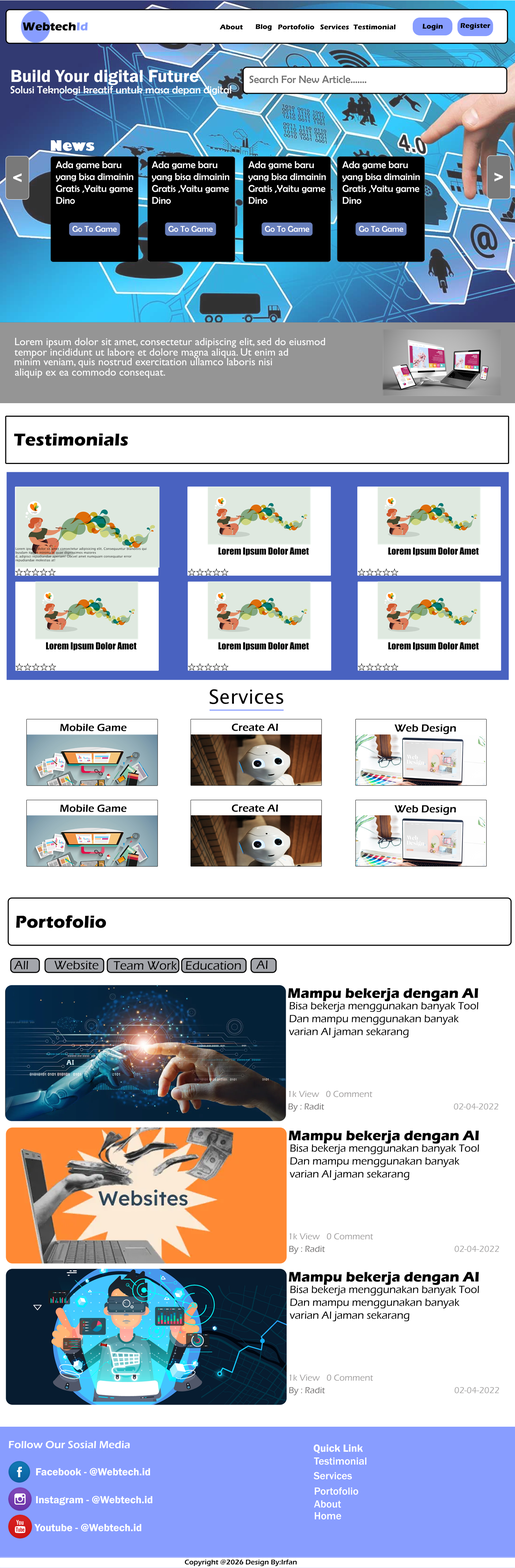
<style>
.page{position:relative;width:515px;height:1568px;background:#ffffff}
.page>*{position:absolute;margin:0}
.t1{font:17.9px "FranklinGothic-Demi";color:#ffffff}
.t2{font:10.7px "BerlinSansFB-Reg";color:#707070}
.t3{font:10.7px "BerlinSansFB-Reg";color:#ffffff}
.t4{font:14.2px "GillSans-UltraBold";color:#ffffff}
.t5{font:9.9px "BerlinSansFB-Reg";color:#ffffff}
.t6{font:17.9px "Impact";color:#ffffff}
.t7{font:8.5px "BerlinSansFB-Reg";color:#ffffff}
.t8{font:10.7px "GillSansMT";color:#ffffff}
.t9{font:17.9px "ErasITC-Bold";color:#000000}
.t10{font:3.2px "LucidaSans";color:#1b1514}
.t11{font:9.1px "Impact";color:#000000}
.t12{font:19.5px "LucidaSans";color:#000000}
.t13{font:10.7px "ErasITC-Demi";color:#000000}
.t14{font:10.7px "ErasITC-Demi";color:#ffffff}
.t15{font:10.7px "FranklinGothic-Demi";color:#ffffff}
.t16{font:10.7px "FranklinGothic-Medium";color:#ffffff}
.t17{font:7.2px "ErasITC-Demi";color:#000000}
</style>
<div class="page">
<p class="t1" style="left:11px;top:69px;width:188px;height:17px">Build Your digital Future</p>
<p class="t2" style="left:249px;top:75px;width:118px;height:8px">Search For New Article.......</p>
<p class="t3" style="left:10px;top:86px;width:222px;height:10px">Solusi Teknologi kreatif untuk masa depan digital</p>
<p class="t4" style="left:50px;top:140px;width:45px;height:11px">News</p>
<p class="t5" style="left:55px;top:161px;width:79px;height:43px">Ada game baru<br>yang bisa dimainin<br>Gratis ,Yaitu game<br>Dino</p>
<p class="t5" style="left:151px;top:161px;width:79px;height:43px">Ada game baru<br>yang bisa dimainin<br>Gratis ,Yaitu game<br>Dino</p>
<p class="t5" style="left:248px;top:161px;width:78px;height:43px">Ada game baru<br>yang bisa dimainin<br>Gratis ,Yaitu game<br>Dino</p>
<p class="t5" style="left:342px;top:161px;width:78px;height:43px">Ada game baru<br>yang bisa dimainin<br>Gratis ,Yaitu game<br>Dino</p>
<p class="t6" style="left:13px;top:173px;width:9px;height:9px;rotate:-180deg">&gt;</p>
<p class="t6" style="left:494px;top:172px;width:10px;height:10px">&gt;</p>
<p class="t7" style="left:72px;top:226px;width:45px;height:7px">Go To Game</p>
<p class="t7" style="left:168px;top:226px;width:45px;height:7px">Go To Game</p>
<p class="t7" style="left:264px;top:226px;width:46px;height:7px">Go To Game</p>
<p class="t7" style="left:358px;top:226px;width:46px;height:7px">Go To Game</p>
<p class="t8" style="left:15px;top:338px;width:311px;height:10px">Lorem ipsum dolor sit amet, consectetur adipiscing elit, sed do eiusmod</p>
<p class="t8" style="left:14px;top:348px;width:275px;height:10px">tempor incididunt ut labore et dolore magna aliqua. Ut enim ad</p>
<p class="t8" style="left:14px;top:358px;width:259px;height:10px">minim veniam, quis nostrud exercitation ullamco laboris nisi</p>
<p class="t8" style="left:15px;top:368px;width:151px;height:10px">aliquip ex ea commodo consequat.</p>
<p class="t9" style="left:14px;top:433px;width:114px;height:13px">Testimonials</p>
<p class="t10" style="left:15px;top:547px;width:132px;height:15px">Lorem ipsum, dolor sit amet consectetur adipisicing elit. Consequuntur blanditiis qui<br>busdam itaque minima in quae dignissimos maiores <br>d, adipisci repudiandae aperiam! Obcvel amet numquam consequatur error <br>repudiandae molestias at!</p>
<p class="t11" style="left:218px;top:547px;width:91px;height:9px">Lorem Ipsum Dolor Amet</p>
<p class="t11" style="left:388px;top:547px;width:91px;height:9px">Lorem Ipsum Dolor Amet</p>
<p class="t11" style="left:46px;top:642px;width:91px;height:8px">Lorem Ipsum Dolor Amet</p>
<p class="t11" style="left:218px;top:642px;width:91px;height:8px">Lorem Ipsum Dolor Amet</p>
<p class="t11" style="left:388px;top:642px;width:91px;height:8px">Lorem Ipsum Dolor Amet</p>
<p class="t12" style="left:210px;top:689px;width:74px;height:15px">Services</p>
<p class="t13" style="left:60px;top:724px;width:67px;height:7px">Mobile Game</p>
<p class="t13" style="left:232px;top:723px;width:46px;height:8px">Create AI</p>
<p class="t13" style="left:395px;top:724px;width:61px;height:10px">Web Design</p>
<p class="t13" style="left:60px;top:805px;width:67px;height:7px">Mobile Game</p>
<p class="t13" style="left:232px;top:804px;width:46px;height:8px">Create AI</p>
<p class="t13" style="left:395px;top:805px;width:61px;height:10px">Web Design</p>
<p class="t14" style="left:8px;top:1441px;width:122px;height:8px">Follow Our Sosial Media</p>
<p class="t15" style="left:313px;top:1444px;width:50px;height:10px">Quick Link</p>
<p class="t16" style="left:314px;top:1457px;width:53px;height:8px">Testimonial</p>
<p class="t15" style="left:36px;top:1468px;width:115px;height:8px">Facebook - @Webtech.id</p>
<p class="t16" style="left:313px;top:1472px;width:39px;height:8px">Services</p>
<p class="t16" style="left:314px;top:1487px;width:45px;height:8px">Portofolio</p>
<p class="t15" style="left:36px;top:1496px;width:117px;height:10px">Instagram - @Webtech.id</p>
<p class="t16" style="left:314px;top:1500px;width:28px;height:8px">About</p>
<p class="t16" style="left:314px;top:1512px;width:28px;height:8px">Home</p>
<p class="t15" style="left:34px;top:1524px;width:108px;height:8px">Youtube - @Webtech.id</p>
<p class="t17" style="left:185px;top:1559px;width:112px;height:7px">Copyright @2026 Design By:Irfan</p>
</div>
